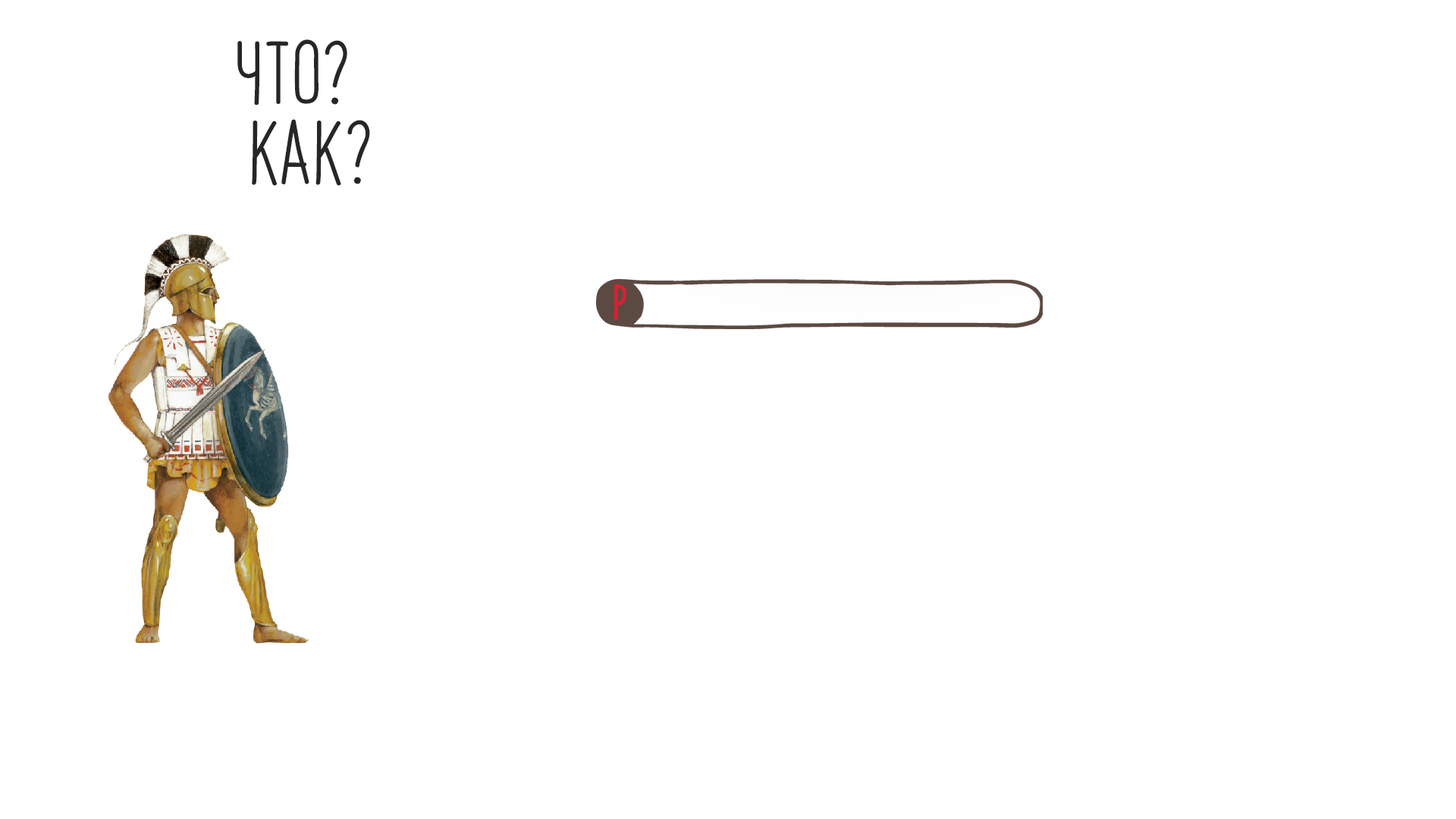
<style>
.page{position:relative;width:1456px;height:819px;background:#ffffff}
.page>*{position:absolute;margin:0}
.t1{font:54.6px "PapayaSunrise";color:#262626}
.t2{font:30.1px "PapayaSunrise";color:#db1f30;font-weight:bold}
</style>
<div class="page">
<p class="t1" style="left:237px;top:39px;width:110px;height:66px">ЧТО?</p>
<p class="t1" style="left:252px;top:119px;width:118px;height:67px">КАК?</p>
<p class="t2" style="left:613px;top:284px;width:13px;height:36px">р</p>
</div>
